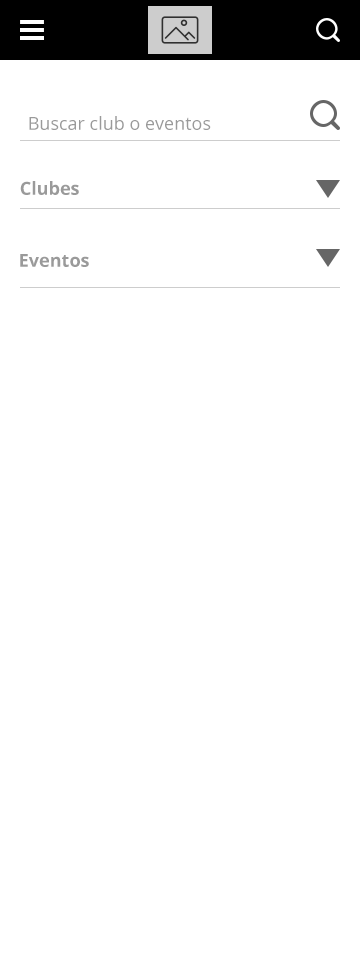
<style>
.page{position:relative;width:360px;height:960px;background:#ffffff}
.page>*{position:absolute;margin:0}
.t1{font:18px "OpenSans";color:#9a9a9a}
.t2{font:18px "OpenSans-Bold";color:#9a9a9a}
</style>
<div class="page">
<p class="t1" style="left:29px;top:116px;width:182px;height:14px">Buscar club o eventos</p>
<p class="t2" style="left:20px;top:181px;width:59px;height:14px">Clubes</p>
<p class="t2" style="left:20px;top:254px;width:69px;height:13px">Eventos</p>
</div>
